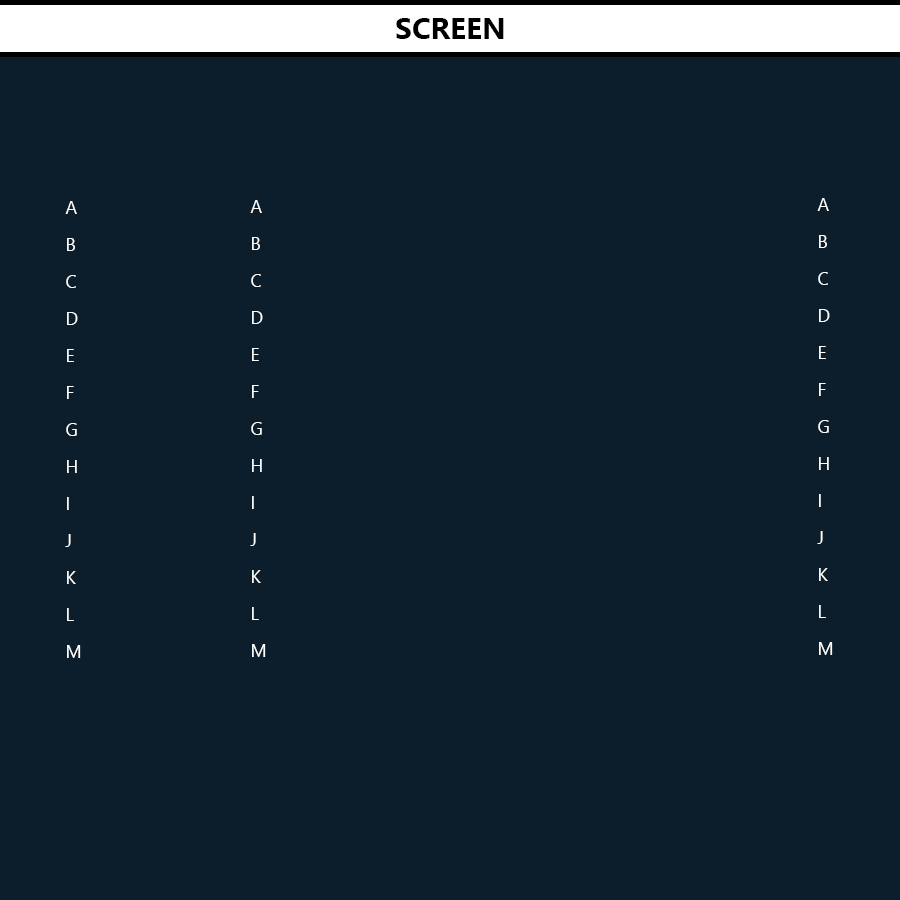
<style>
.page{position:relative;width:900px;height:900px;background:#0c1e2c}
.page>*{position:absolute;margin:0}
.t1{font:30px "SegoeUI-Bold";color:#000000}
.t2{font:18px/37px "SegoeUI";color:#ffffff}
</style>
<div class="page">
<p class="t1" style="left:396px;top:18px;width:108px;height:21px">SCREEN</p>
<p class="t2" style="left:817px;top:198px;width:16px;height:457px">A<br>B<br>C<br>D<br>E<br>F<br>G<br>H<br>I<br>J<br>K<br>L<br>M</p>
<p class="t2" style="left:65px;top:201px;width:16px;height:457px">A<br>B<br>C<br>D<br>E<br>F<br>G<br>H<br>I<br>J<br>K<br>L<br>M</p>
<p class="t2" style="left:250px;top:200px;width:16px;height:457px">A<br>B<br>C<br>D<br>E<br>F<br>G<br>H<br>I<br>J<br>K<br>L<br>M</p>
</div>
